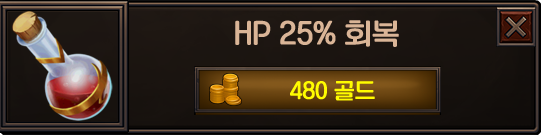
<style>
.page{position:relative;width:541px;height:135px}
.page>*{position:absolute;margin:0}
.t1{font:27.7px "KoreanNGL3-R";color:#dab597}
.t2{font:20.8px "KoreanNGL3-R";color:#fffc00}
</style>
<div class="page">
<p class="t1" style="left:235px;top:20px;width:164px;height:27px">HP 25% 회복</p>
<p class="t2" style="left:290px;top:81px;width:85px;height:20px">480 골드</p>
</div>
